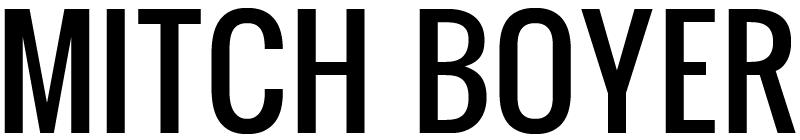
<style>
.page{position:relative;width:800px;height:140px;background:#ffffff}
.page>*{position:absolute;margin:0}
.t1{font:142.3px "Oswald";color:#000000}
</style>
<div class="page">
<p class="t1" style="left:4px;top:8px;width:792px;height:126px">MITCH BOYER</p>
</div>
